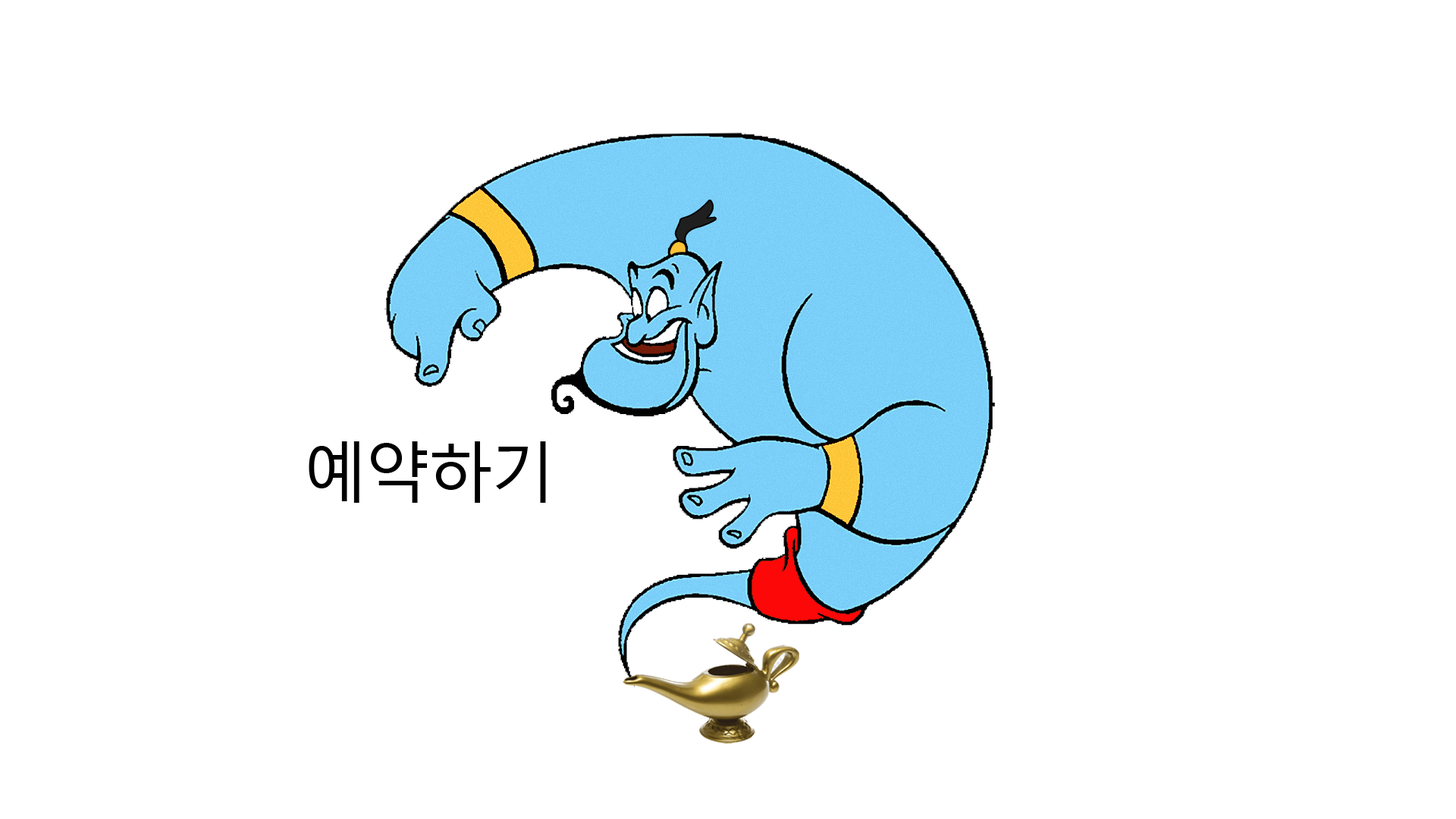
<style>
.page{position:relative;width:1456px;height:819px;background:#ffffff}
.page>*{position:absolute;margin:0}
.t1{font:67.1px "HanSantteutDotumRegular";color:#000000}
</style>
<div class="page">
<p class="t1" style="left:309px;top:441px;width:237px;height:62px">예약하기</p>
</div>
